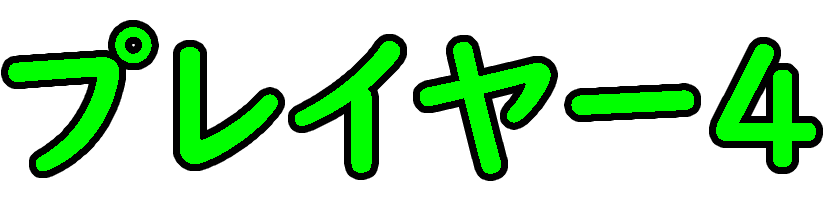
<style>
.page{position:relative;width:826px;height:200px;background:#ffffff}
.page>*{position:absolute;margin:0}
.t1{font:161.6px "UDDigiKyokashoNK-B";color:#00ff00}
</style>
<div class="page">
<p class="t1" style="left:8px;top:27px;width:808px;height:147px">プレイヤー4</p>
</div>
